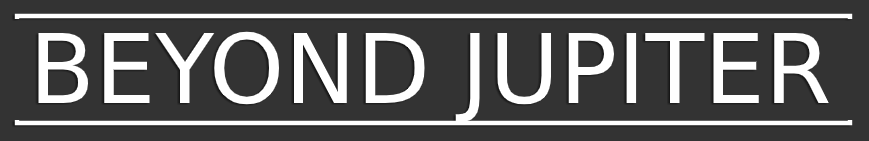
<style>
.page{position:relative;width:869px;height:141px;background:#333333}
.page>*{position:absolute;margin:0}
.t1{font:96px "DejaVuSans";color:#ffffff}
</style>
<div class="page">
<p class="t1" style="left:38px;top:31px;width:791px;height:92px">BEYOND JUPITER</p>
</div>
